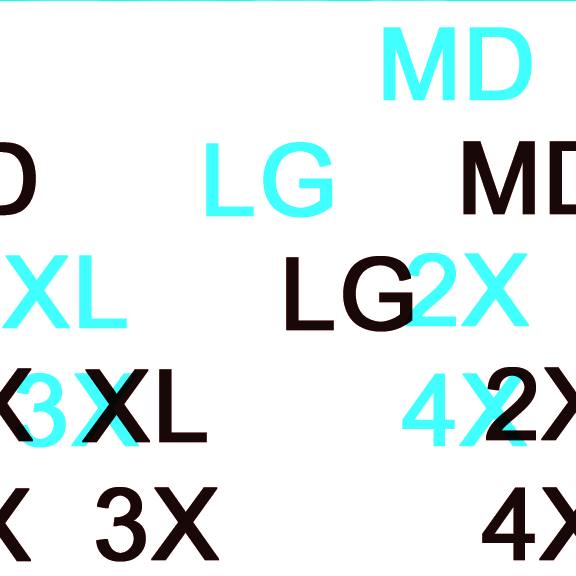
<style>
.page{position:relative;width:576px;height:576px;background:#ffffff}
.page>*{position:absolute;margin:0}
.t1{font:100px "ArialMT";color:#40ffff;font-weight:bold}
.t2{font:100px "ArialMT";font-weight:bold}
</style>
<div class="page">
<p class="t1" style="left:383px;top:26px;width:149px;height:74px">MD</p>
<p class="t1" style="left:206px;top:141px;width:127px;height:76px">LG</p>
<p class="t1" style="left:2px;top:254px;width:125px;height:74px">XL</p>
<p class="t1" style="left:406px;top:252px;width:123px;height:74px">2X</p>
<p class="t2" style="left:16px;top:372px;width:123px;height:75px">3X</p>
<p class="t1" style="left:402px;top:372px;width:125px;height:74px">4X</p>
</div>
